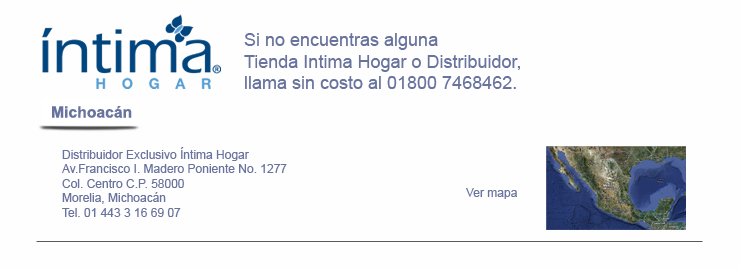
<style>
.page{position:relative;width:740px;height:270px;background:#fffeff}
.page>*{position:absolute;margin:0}
.t1{font:18px "ArialMT";color:#69749e}
.t2{font:15.7px "Arial-BoldMT";color:#69749e}
.t3{font:12px "ArialMT";color:#69749e}
</style>
<div class="page">
<p class="t1" style="left:244px;top:33px;width:276px;height:56px">Si no encuentras alguna <br>Tienda Intima Hogar o Distribuidor, <br>llama sin costo al 01800 7468462.</p>
<p class="t2" style="left:52px;top:106px;width:80px;height:12px">Michoacán</p>
<p class="t3" style="left:62px;top:147px;width:225px;height:70px">Distribuidor Exclusivo Íntima Hogar<br>Av.Francisco I. Madero Poniente No. 1277 <br>Col. Centro C.P. 58000<br>Morelia, Michoacán <br>Tel. 01 443 3 16 69 07</p>
<p class="t3" style="left:466px;top:188px;width:51px;height:11px">Ver mapa</p>
</div>
